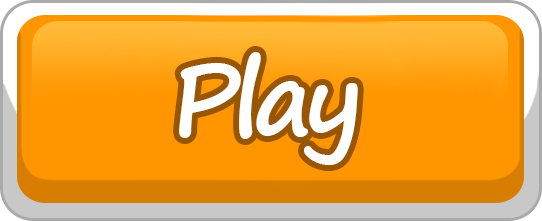
<style>
.page{position:relative;width:542px;height:221px;background:#ff9600}
.page>*{position:absolute;margin:0}
.t1{font:100px "SegoePrint-Bold";letter-spacing:-0.075em;color:#ffffff}
</style>
<div class="page">
<p class="t1" style="left:179px;top:52px;width:179px;height:113px">Play</p>
</div>
